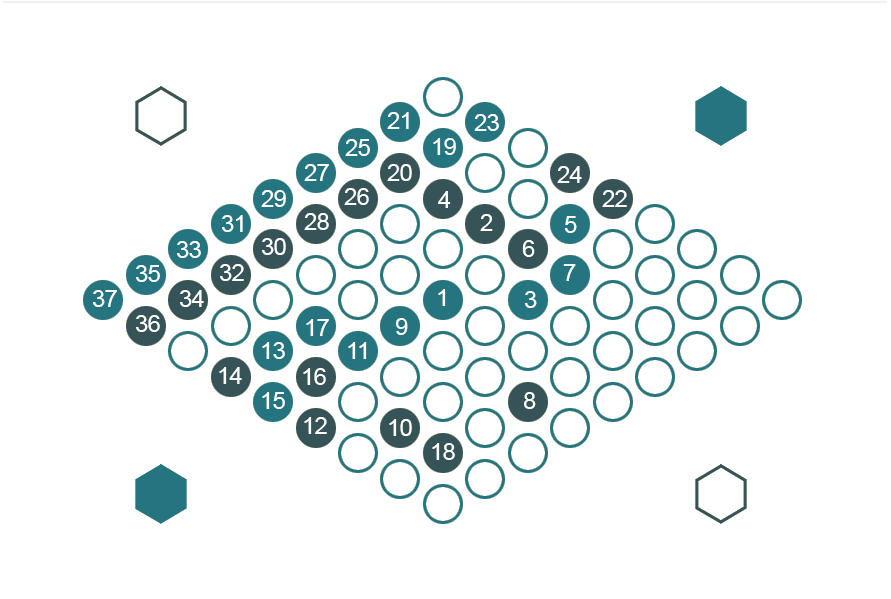
<style>
.page{position:relative;width:891px;height:599px;background:#ffffff}
.page>*{position:absolute;margin:0}
.t1{font:24px "ArialMT";letter-spacing:-0.025em;color:#ffffff}
</style>
<div class="page">
<p class="t1" style="left:387px;top:112px;width:22px;height:17px">21</p>
<p class="t1" style="left:474px;top:114px;width:25px;height:17px">23</p>
<p class="t1" style="left:345px;top:139px;width:25px;height:17px">25</p>
<p class="t1" style="left:433px;top:138px;width:23px;height:17px">19</p>
<p class="t1" style="left:304px;top:164px;width:25px;height:17px">27</p>
<p class="t1" style="left:387px;top:164px;width:25px;height:17px">20</p>
<p class="t1" style="left:557px;top:166px;width:25px;height:17px">24</p>
<p class="t1" style="left:261px;top:190px;width:25px;height:17px">29</p>
<p class="t1" style="left:344px;top:188px;width:25px;height:17px">26</p>
<p class="t1" style="left:438px;top:191px;width:13px;height:17px">4</p>
<p class="t1" style="left:602px;top:190px;width:25px;height:17px">22</p>
<p class="t1" style="left:222px;top:215px;width:21px;height:17px">31</p>
<p class="t1" style="left:304px;top:213px;width:25px;height:17px">28</p>
<p class="t1" style="left:480px;top:214px;width:13px;height:17px">2</p>
<p class="t1" style="left:565px;top:216px;width:12px;height:17px">5</p>
<p class="t1" style="left:177px;top:241px;width:24px;height:17px">33</p>
<p class="t1" style="left:262px;top:238px;width:24px;height:17px">30</p>
<p class="t1" style="left:522px;top:240px;width:13px;height:17px">6</p>
<p class="t1" style="left:136px;top:265px;width:24px;height:17px">35</p>
<p class="t1" style="left:220px;top:264px;width:24px;height:17px">32</p>
<p class="t1" style="left:563px;top:264px;width:13px;height:17px">7</p>
<p class="t1" style="left:93px;top:290px;width:24px;height:17px">37</p>
<p class="t1" style="left:180px;top:290px;width:24px;height:17px">34</p>
<p class="t1" style="left:438px;top:289px;width:8px;height:17px">1</p>
<p class="t1" style="left:525px;top:291px;width:12px;height:17px">3</p>
<p class="t1" style="left:136px;top:315px;width:24px;height:17px">36</p>
<p class="t1" style="left:395px;top:318px;width:13px;height:17px">9</p>
<p class="t1" style="left:306px;top:319px;width:23px;height:17px">17</p>
<p class="t1" style="left:262px;top:342px;width:23px;height:17px">13</p>
<p class="t1" style="left:348px;top:342px;width:19px;height:17px">11</p>
<p class="t1" style="left:219px;top:367px;width:23px;height:17px">14</p>
<p class="t1" style="left:303px;top:368px;width:23px;height:17px">16</p>
<p class="t1" style="left:262px;top:392px;width:23px;height:17px">15</p>
<p class="t1" style="left:524px;top:392px;width:12px;height:17px">8</p>
<p class="t1" style="left:304px;top:417px;width:23px;height:17px">12</p>
<p class="t1" style="left:389px;top:419px;width:23px;height:17px">10</p>
<p class="t1" style="left:432px;top:443px;width:23px;height:17px">18</p>
</div>
